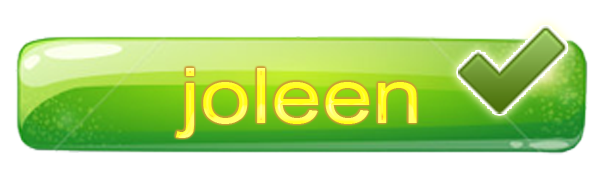
<style>
.page{position:relative;width:599px;height:193px;background:#ffffff}
.page>*{position:absolute;margin:0}
.t1{font:76.6px "ArialUnicodeMS";scale:1.19 1}
</style>
<div class="page">
<p class="t1" style="left:175px;top:68px;width:242px;height:70px">joleen</p>
</div>
